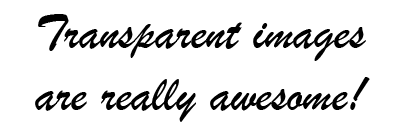
<style>
.page{position:relative;width:400px;height:128px;background:#ffffff}
.page>*{position:absolute;margin:0}
.t1{font:52px "BrushScriptMT";color:#000000}
</style>
<div class="page">
<p class="t1" style="left:35px;top:14px;width:335px;height:108px;text-align:center">Transparent images<br>are really awesome!</p>
</div>
